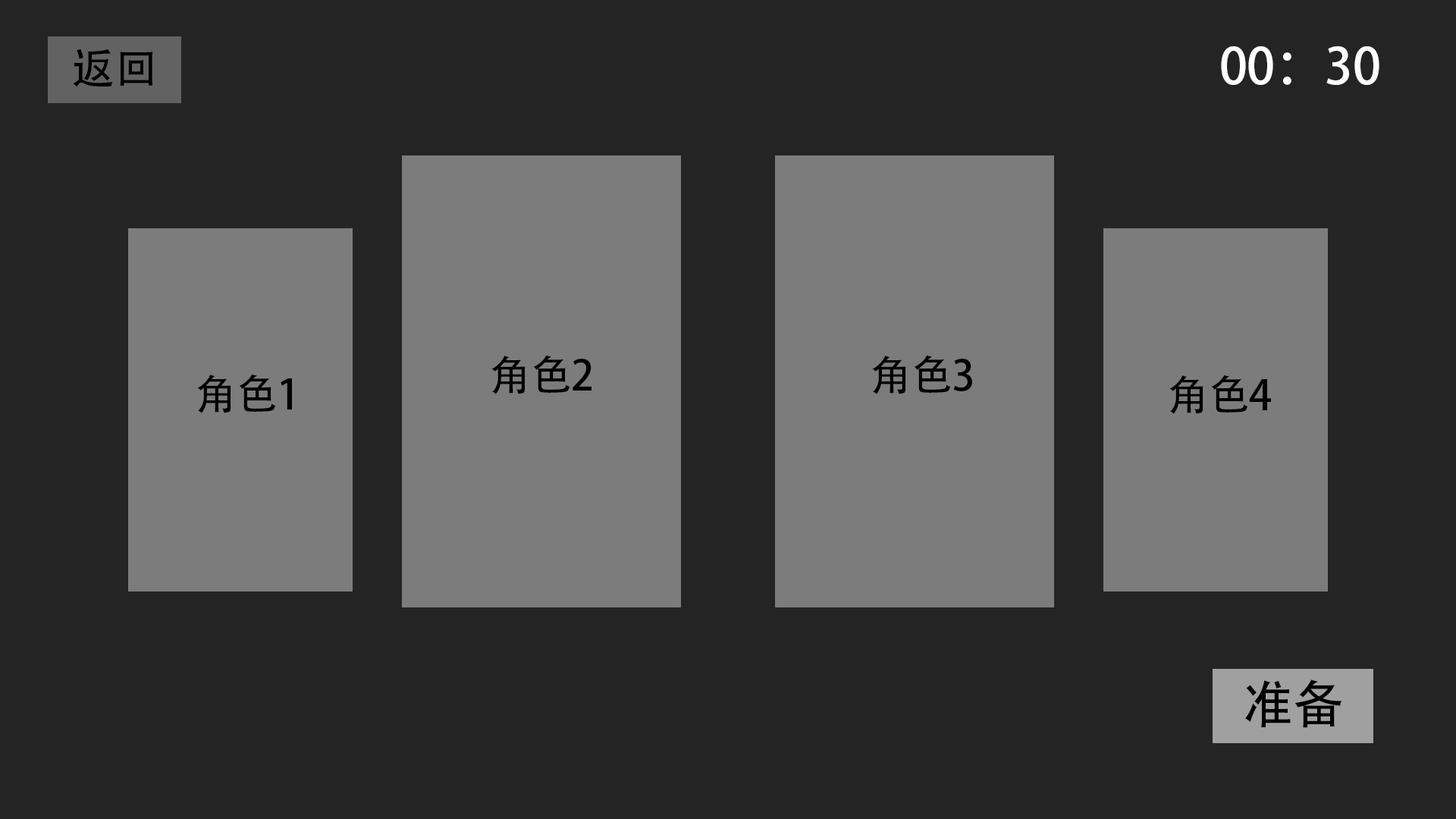
<style>
.page{position:relative;width:1456px;height:819px;background:#242424}
.page>*{position:absolute;margin:0}
.t1{font:49.8px "AdobeHeitiStd-Regular";color:#ffffff}
.t2{font:41.4px "AdobeHeitiStd-Regular";color:#000000}
.t3{font:51.3px "AdobeHeitiStd-Regular";color:#000000}
</style>
<div class="page">
<p class="t1" style="left:1221px;top:46px;width:158px;height:39px">00：30</p>
<p class="t2" style="left:491px;top:355px;width:100px;height:39px">角色2</p>
<p class="t2" style="left:872px;top:355px;width:100px;height:39px">角色3</p>
<p class="t2" style="left:197px;top:374px;width:95px;height:39px">角色1</p>
<p class="t2" style="left:1169px;top:375px;width:102px;height:39px">角色4</p>
<p class="t3" style="left:1245px;top:679px;width:97px;height:49px">准备</p>
</div>
